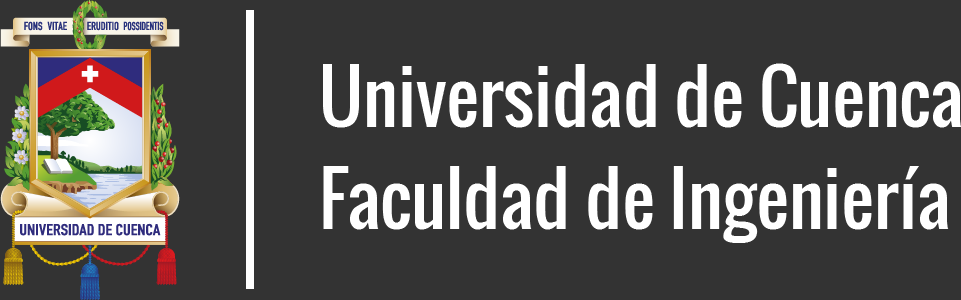
<style>
.page{position:relative;width:961px;height:300px;background:#333333}
.page>*{position:absolute;margin:0}
.t1{font:72px/102px "Oswald-Regular";color:#ffffff}
</style>
<div class="page">
<p class="t1" style="left:323px;top:63px;width:639px;height:180px">Universidad de Cuenca<br>Faculdad de Ingeniería</p>
</div>
